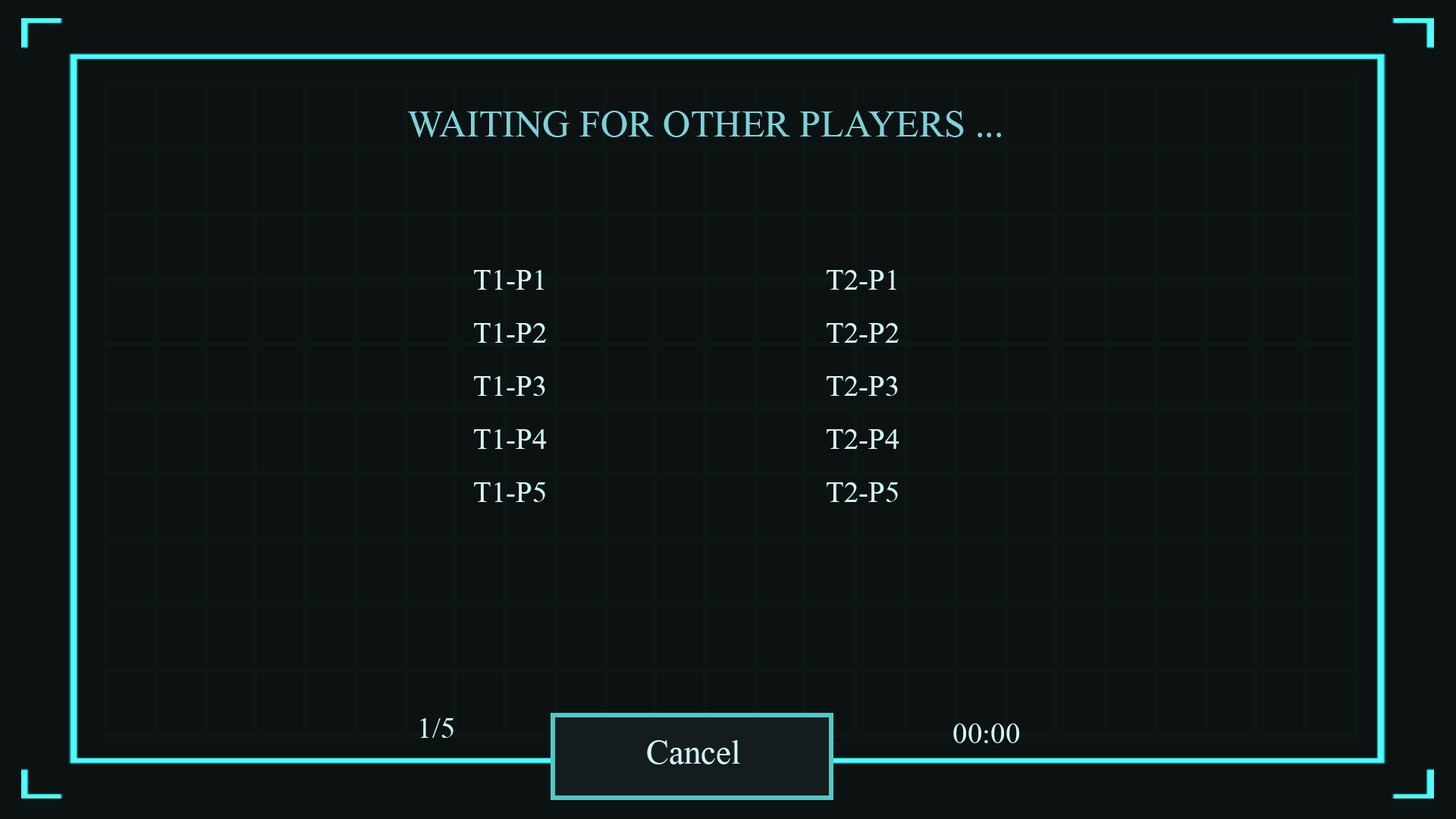
<style>
.page{position:relative;width:1456px;height:819px;background:#0c1212}
.page>*{position:absolute;margin:0}
.t1{font:56.9px "Microsoft-Himalaya";color:#7dd2d8}
.t2{font:44.2px "Microsoft-Himalaya";color:#d1f6f9}
.t3{font:50.6px "Microsoft-Himalaya";color:#d1f6f9}
</style>
<div class="page">
<p class="t1" style="left:407px;top:111px;width:594px;height:26px">WAITING FOR OTHER PLAYERS ...</p>
<p class="t2" style="left:474px;top:270px;width:73px;height:232px;text-align:center">T1-P1<br>T1-P2<br>T1-P3<br>T1-P4<br>T1-P5</p>
<p class="t2" style="left:827px;top:270px;width:72px;height:232px;text-align:center">T2-P1<br>T2-P2<br>T2-P3<br>T2-P4<br>T2-P5</p>
<p class="t2" style="left:420px;top:718px;width:33px;height:20px">1/5</p>
<p class="t2" style="left:953px;top:723px;width:66px;height:20px">00:00</p>
<p class="t3" style="left:647px;top:740px;width:93px;height:24px">Cancel</p>
</div>
